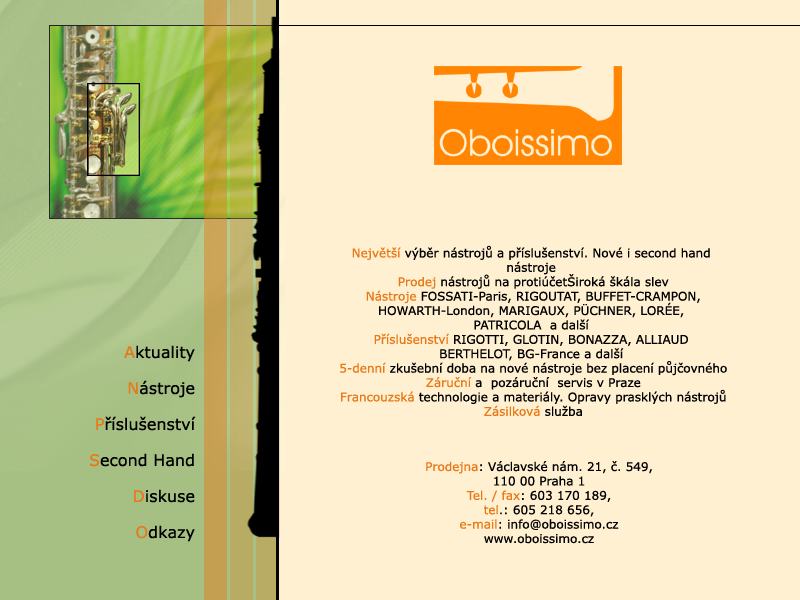
<style>
.page{position:relative;width:800px;height:600px;background:#fff0d1}
.page>*{position:absolute;margin:0}
.t1{font:12px "Verdana";color:#000000}
.t2{font:12px "Verdana";color:#e77918}
.t3{font:16px/36px "Verdana";color:#000000}
.t4{font:16px/36px "Verdana";color:#e77918}
</style>
<div class="page">
<p class="t1" style="left:340px;top:245px;width:387px;height:171px;text-align:center"><span class="t2">Největší</span> výběr nástrojů a příslušenství. Nové i second hand <br>nástroje<br> <span class="t2">Prodej</span> nástrojů na protiúčetŠiroká škála slev<br> <span class="t2">Nástroje</span> FOSSATI-Paris, RIGOUTAT, BUFFET-CRAMPON, <br>HOWARTH-London, MARIGAUX, PÜCHNER, LORÉE, <br>PATRICOLA  a další<br><span class="t2">Příslušenství </span>RIGOTTI, GLOTIN, BONAZZA, ALLIAUD<br>BERTHELOT, BG-France a další<br> <span class="t2">5-denní</span> zkušební doba na nové nástroje bez placení půjčovného<br> <span class="t2">Záruční</span> a  pozáruční  servis v Praze<br> <span class="t2">Francouzská </span>technologie a materiály. Opravy prasklých nástrojů<br> <span class="t2">Zásilková</span> služba</p>
<p class="t3" style="left:90px;top:345px;width:106px;height:197px;text-align:right"><span class="t4">A</span>ktuality<br><span class="t4">N</span>ástroje<br><span class="t4">P</span>říslušenství<br><span class="t4">S</span>econd Hand<br><span class="t4">D</span>iskuse<br><span class="t4">O</span>dkazy</p>
<p class="t1" style="left:426px;top:461px;width:226px;height:83px;text-align:center"><span class="t2">Prodejna</span>: Václavské nám. 21, č. 549, <br>110 00 Praha 1<br><span class="t2">Tel. / fax</span>: 603 170 189, <br><span class="t2">tel</span>.: 605 218 656, <br><span class="t2">e-mail</span>: info@oboissimo.cz<br>www.oboissimo.cz</p>
</div>
